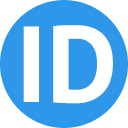
<style>
.page{position:relative;width:128px;height:128px;background:#2f97e9}
.page>*{position:absolute;margin:0}
.t1{font:108px "PTSans-Bold";color:#ffffff}
</style>
<div class="page">
<p class="t1" style="left:23px;top:25px;width:90px;height:79px">ID</p>
</div>
